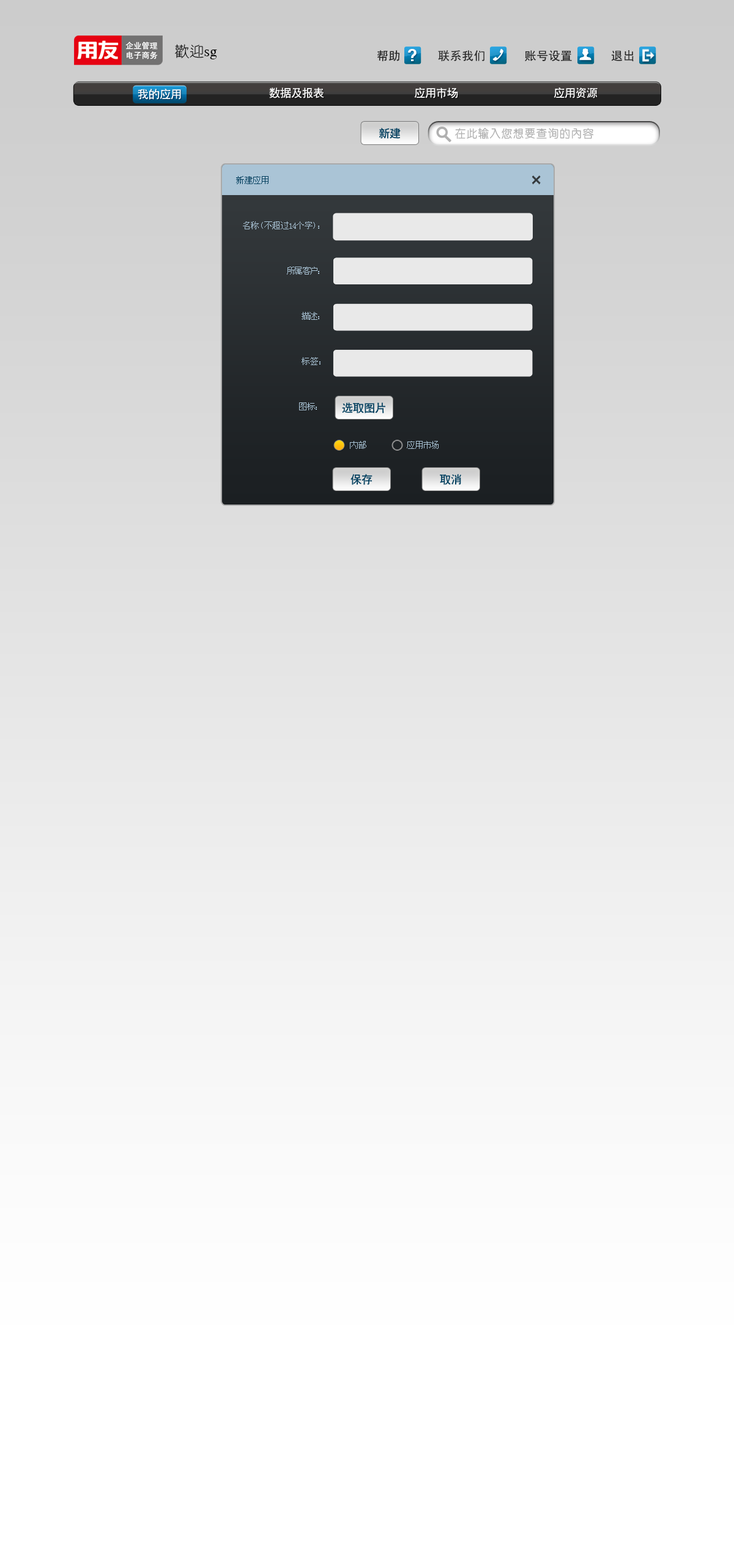
<style>
.page{position:relative;width:734px;height:1568px}
.page>*{position:absolute;margin:0}
.t1{font:14.7px "CTXianTiSF";color:#070707}
.t2{font:12px "SimHei";color:#232323}
.t3{font:16.8px "CTCuHeiSJ";color:#fefefe}
.t4{font:11px "CTCuHeiSJ";color:#ffffff}
.t5{font:11px "CTCuHeiSJ";color:#04405f;text-transform:uppercase}
.t6{font:11.6px "CTZhongYuanSJ";color:#b0b0b0}
.t7{font:8.6px "NSimSun";color:#04405f;text-transform:uppercase}
.t8{font:8.6px "NSimSun";color:#aac4d6;text-transform:uppercase}
.t9{font:8.6px "NSimSun";letter-spacing:0.02em;color:#aac4d6;text-transform:uppercase}
</style>
<div class="page">
<p class="t1" style="left:175px;top:44px;width:42px;height:15px">欢迎sg</p>
<p class="t2" style="left:377px;top:50px;width:23px;height:12px">帮助</p>
<p class="t3" style="left:408px;top:49px;width:8px;height:12px">?</p>
<p class="t2" style="left:438px;top:50px;width:46px;height:12px">联系我们</p>
<p class="t2" style="left:525px;top:50px;width:47px;height:11px">账号设置</p>
<p class="t2" style="left:611px;top:50px;width:23px;height:12px">退出</p>
<p class="t4" style="left:138px;top:89px;width:43px;height:11px">我的应用</p>
<p class="t4" style="left:269px;top:87px;width:55px;height:11px">数据及报表</p>
<p class="t4" style="left:414px;top:87px;width:44px;height:11px">应用市场</p>
<p class="t4" style="left:553px;top:87px;width:44px;height:11px">应用资源</p>
<p class="t5" style="left:379px;top:128px;width:22px;height:11px">新建</p>
<p class="t6" style="left:455px;top:128px;width:139px;height:11px">在此输入您想要查询的内容</p>
<p class="t7" style="left:236px;top:176px;width:32px;height:8px">新建应用</p>
<p class="t8" style="left:243px;top:221px;width:76px;height:8px">名称（不超过14个字）：</p>
<p class="t8" style="left:287px;top:267px;width:32px;height:8px">所属客户：</p>
<p class="t8" style="left:301px;top:312px;width:18px;height:8px">描述：</p>
<p class="t8" style="left:301px;top:357px;width:19px;height:8px">标签：</p>
<p class="t8" style="left:299px;top:402px;width:18px;height:8px">图标：</p>
<p class="t5" style="left:342px;top:402px;width:43px;height:11px">选取图片</p>
<p class="t9" style="left:350px;top:441px;width:16px;height:8px">内部</p>
<p class="t8" style="left:407px;top:441px;width:31px;height:8px">应用市场</p>
<p class="t5" style="left:350px;top:474px;width:22px;height:11px">保存</p>
<p class="t5" style="left:440px;top:474px;width:21px;height:11px">取消</p>
</div>
